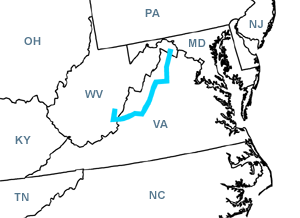
<style>
.page{position:relative;width:300px;height:218px;background:#ffffff}
.page>*{position:absolute;margin:0}
.t1{font:10.9px "Arial-BoldMT";letter-spacing:0.05em;color:#55778e}
</style>
<div class="page">
<p class="t1" style="left:145px;top:9px;width:15px;height:8px">PA</p>
<p class="t1" style="left:249px;top:20px;width:14px;height:8px">NJ</p>
<p class="t1" style="left:24px;top:37px;width:17px;height:8px">OH</p>
<p class="t1" style="left:189px;top:39px;width:17px;height:8px">MD</p>
<p class="t1" style="left:85px;top:90px;width:18px;height:8px">WV</p>
<p class="t1" style="left:153px;top:120px;width:15px;height:8px">VA</p>
<p class="t1" style="left:15px;top:136px;width:16px;height:8px">KY</p>
<p class="t1" style="left:14px;top:193px;width:15px;height:8px">TN</p>
<p class="t1" style="left:149px;top:191px;width:16px;height:8px">NC</p>
</div>
